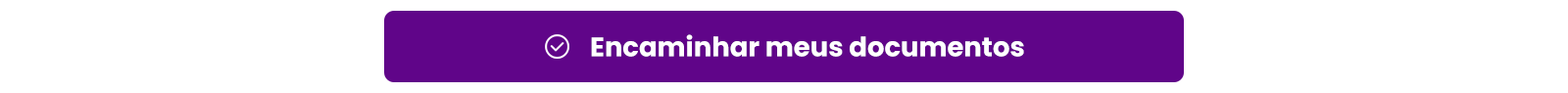
<style>
.page{position:relative;width:1568px;height:93px;background:#ffffff}
.page>*{position:absolute;margin:0}
.t1{font:26.9px "Poppins-Bold";color:#ffffff}
</style>
<div class="page">
<p class="t1" style="left:591px;top:34px;width:433px;height:23px">Encaminhar meus documentos</p>
</div>
